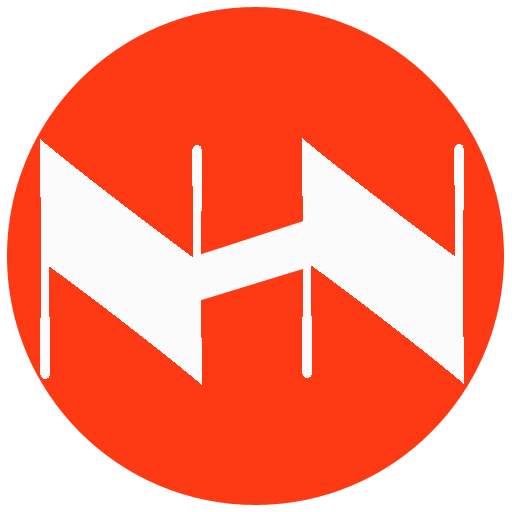
<style>
.page{position:relative;width:512px;height:512px;background:#fd3a13}
.page>*{position:absolute;margin:0}
.t1{font:342.4px "Broadway";color:#fcfbfb;scale:0.73 1}
</style>
<div class="page">
<p class="t1" style="left:40px;top:139px;width:162px;height:246px">N</p>
<p class="t1" style="left:302px;top:138px;width:162px;height:246px">N</p>
</div>
